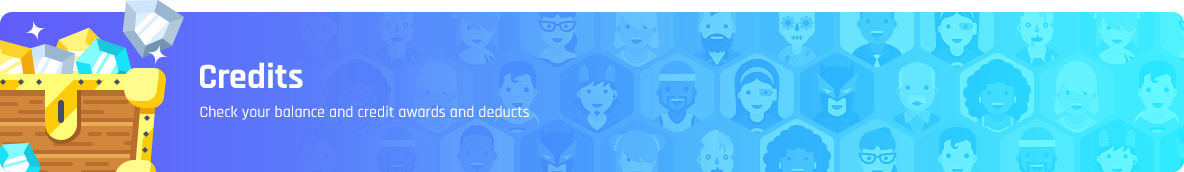
<style>
.page{position:relative;width:1184px;height:172px}
.page>*{position:absolute;margin:0}
.t1{font:36px "Rajdhani-Bold";color:#ffffff}
.t2{font:16px "Rajdhani-Medium";color:#ffffff}
</style>
<div class="page">
<p class="t1" style="left:200px;top:62px;width:103px;height:26px">Credits</p>
<p class="t2" style="left:200px;top:105px;width:329px;height:15px">Check your balance and credit awards and deducts</p>
</div>
